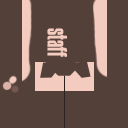
<style>
.page{position:relative;width:128px;height:128px;background:#524039}
.page>*{position:absolute;margin:0}
.t1{font:24px "Compacta";color:#f4cbbf;scale:0.93 1}
</style>
<div class="page">
<p class="t1" style="left:47px;top:28px;width:20px;height:29px;rotate:90deg">staff</p>
</div>
